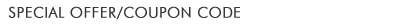
<style>
.page{position:relative;width:400px;height:24px;background:#ffffff}
.page>*{position:absolute;margin:0}
.t1{font:14.7px "FuturaBT-Light";letter-spacing:0.025em;color:#363636;text-transform:uppercase;font-weight:bold}
</style>
<div class="page">
<p class="t1" style="left:8px;top:6px;width:232px;height:14px">SPECIAL OFFER/COUPON CODE</p>
</div>
